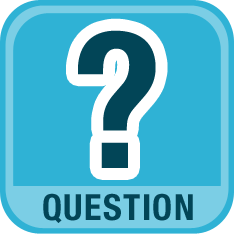
<style>
.page{position:relative;width:234px;height:234px;background:#2fb2d5}
.page>*{position:absolute;margin:0}
.t1{font:190px "HelveticaNeue-BoldCond";letter-spacing:0.04em;color:#024557}
.t2{font:36px "HelveticaNeue-BoldCond";letter-spacing:0.04em;color:#024557}
</style>
<div class="page">
<p class="t1" style="left:78px;top:30px;width:78px;height:138px">?</p>
<p class="t2" style="left:43px;top:193px;width:150px;height:30px">QUESTION</p>
</div>
